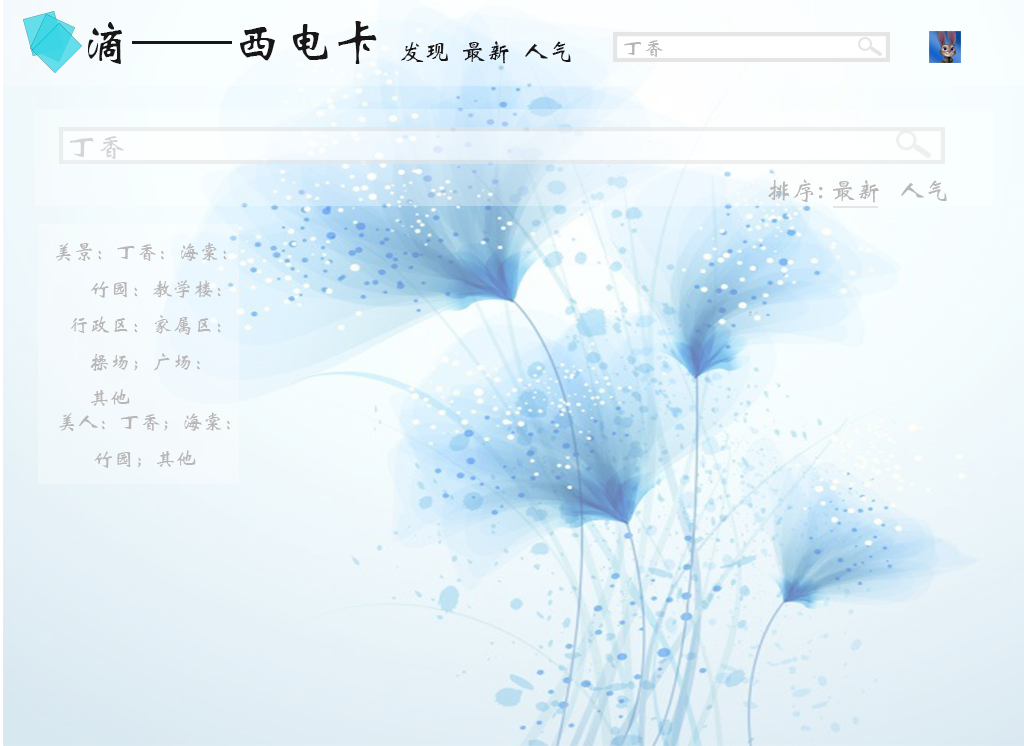
<style>
.page{position:relative;width:1024px;height:746px}
.page>*{position:absolute;margin:0}
.t1{font:50px "STXinwei";color:#181616}
.t2{font:25px "STXinwei";color:#181616}
.t3{font:20.8px "STXinwei";color:#b8b6b6}
.t4{font:29.2px "STXinwei";color:#d5d5d5}
.t5{font:25px "STXinwei";color:#b8b6b6}
</style>
<div class="page">
<p class="t1" style="left:88px;top:21px;width:289px;height:43px">滴——西电卡</p>
<p class="t2" style="left:401px;top:41px;width:170px;height:23px">发现  最新  人气</p>
<p class="t3" style="left:624px;top:40px;width:39px;height:17px">丁香</p>
<p class="t4" style="left:70px;top:136px;width:54px;height:24px">丁香</p>
<p class="t5" style="left:768px;top:179px;width:179px;height:24px">排序: 最新   人气</p>
<p class="t3" style="left:55px;top:242px;width:172px;height:164px">美景：丁香：海棠：<br> 竹园：教学楼：<br>   行政区：家属区：<br> 操场；广场：<br> 其他</p>
<p class="t3" style="left:59px;top:412px;width:171px;height:56px">美人：丁香；海棠：<br> 竹园；其他</p>
</div>
